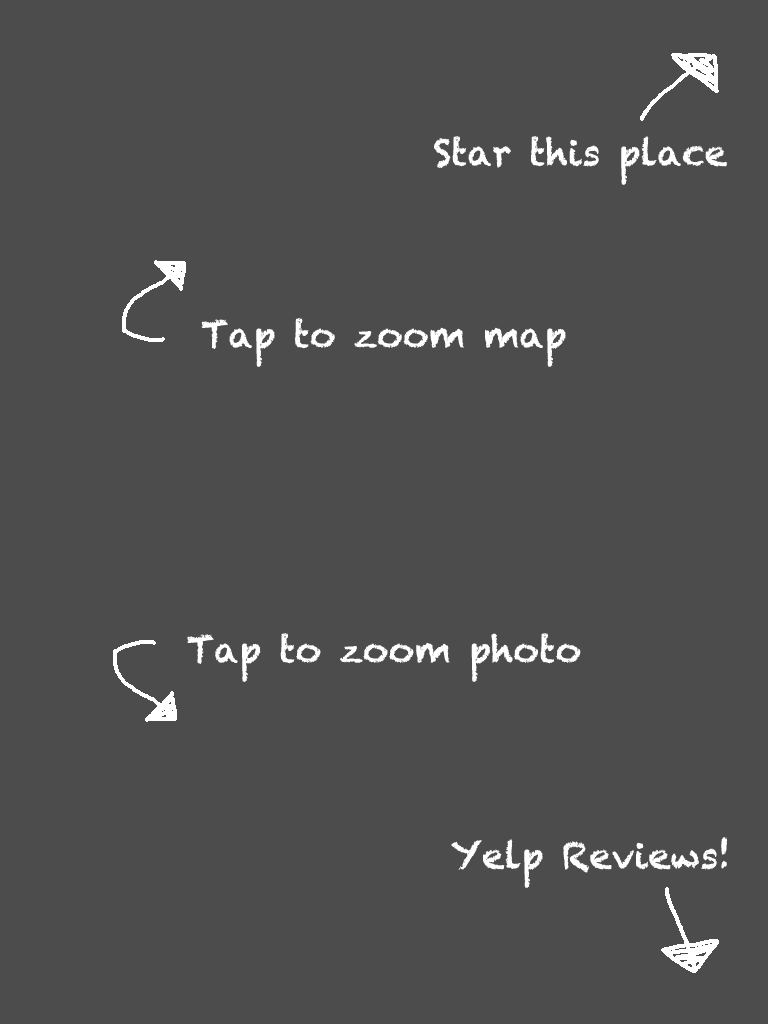
<style>
.page{position:relative;width:768px;height:1024px;background:#4c4c4c}
.page>*{position:absolute;margin:0}
.t1{font:36px "Chalkduster";color:#ffffff}
</style>
<div class="page">
<p class="t1" style="left:434px;top:136px;width:294px;height:49px">Star this place</p>
<p class="t1" style="left:201px;top:318px;width:365px;height:49px">Tap to zoom map</p>
<p class="t1" style="left:187px;top:633px;width:394px;height:49px">Tap to zoom photo</p>
<p class="t1" style="left:451px;top:837px;width:277px;height:51px">Yelp Reviews!</p>
</div>
